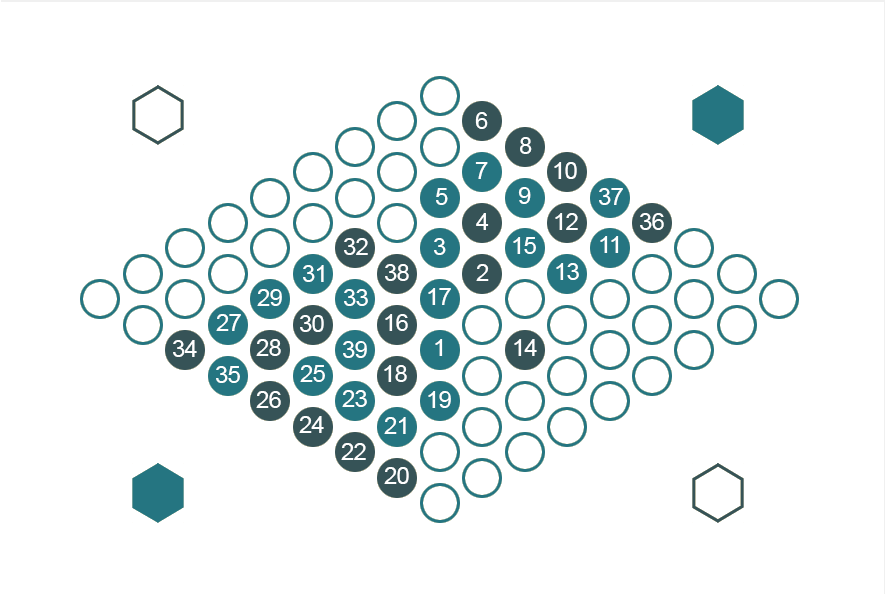
<style>
.page{position:relative;width:886px;height:595px;background:#ffffff}
.page>*{position:absolute;margin:0}
.t1{font:24px "ArialMT";letter-spacing:-0.025em;color:#ffffff}
</style>
<div class="page">
<p class="t1" style="left:475px;top:112px;width:13px;height:17px">6</p>
<p class="t1" style="left:520px;top:137px;width:12px;height:17px">8</p>
<p class="t1" style="left:475px;top:162px;width:13px;height:17px">7</p>
<p class="t1" style="left:554px;top:162px;width:23px;height:17px">10</p>
<p class="t1" style="left:436px;top:188px;width:12px;height:17px">5</p>
<p class="t1" style="left:518px;top:187px;width:13px;height:17px">9</p>
<p class="t1" style="left:599px;top:188px;width:24px;height:17px">37</p>
<p class="t1" style="left:476px;top:213px;width:13px;height:17px">4</p>
<p class="t1" style="left:555px;top:213px;width:23px;height:17px">12</p>
<p class="t1" style="left:640px;top:213px;width:24px;height:17px">36</p>
<p class="t1" style="left:344px;top:238px;width:24px;height:17px">32</p>
<p class="t1" style="left:434px;top:238px;width:12px;height:17px">3</p>
<p class="t1" style="left:513px;top:237px;width:23px;height:17px">15</p>
<p class="t1" style="left:600px;top:236px;width:19px;height:17px">11</p>
<p class="t1" style="left:303px;top:265px;width:21px;height:17px">31</p>
<p class="t1" style="left:385px;top:264px;width:24px;height:17px">38</p>
<p class="t1" style="left:476px;top:264px;width:13px;height:17px">2</p>
<p class="t1" style="left:556px;top:263px;width:23px;height:17px">13</p>
<p class="t1" style="left:257px;top:289px;width:25px;height:17px">29</p>
<p class="t1" style="left:344px;top:289px;width:24px;height:17px">33</p>
<p class="t1" style="left:428px;top:288px;width:23px;height:17px">17</p>
<p class="t1" style="left:216px;top:314px;width:25px;height:17px">27</p>
<p class="t1" style="left:300px;top:315px;width:24px;height:17px">30</p>
<p class="t1" style="left:385px;top:314px;width:23px;height:17px">16</p>
<p class="t1" style="left:173px;top:340px;width:24px;height:17px">34</p>
<p class="t1" style="left:256px;top:339px;width:25px;height:17px">28</p>
<p class="t1" style="left:343px;top:341px;width:24px;height:17px">39</p>
<p class="t1" style="left:435px;top:339px;width:8px;height:17px">1</p>
<p class="t1" style="left:514px;top:339px;width:23px;height:17px">14</p>
<p class="t1" style="left:216px;top:366px;width:24px;height:17px">35</p>
<p class="t1" style="left:300px;top:365px;width:25px;height:17px">25</p>
<p class="t1" style="left:384px;top:365px;width:23px;height:17px">18</p>
<p class="t1" style="left:342px;top:390px;width:25px;height:17px">23</p>
<p class="t1" style="left:256px;top:391px;width:25px;height:17px">26</p>
<p class="t1" style="left:428px;top:391px;width:23px;height:17px">19</p>
<p class="t1" style="left:299px;top:416px;width:25px;height:17px">24</p>
<p class="t1" style="left:384px;top:417px;width:22px;height:17px">21</p>
<p class="t1" style="left:341px;top:443px;width:25px;height:17px">22</p>
<p class="t1" style="left:384px;top:467px;width:25px;height:17px">20</p>
</div>
